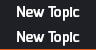
<style>
.page{position:relative;width:96px;height:50px;background:#1e2025}
.page>*{position:absolute;margin:0}
.t1{font:14px "Exo-DemiBold";color:#ffffff}
</style>
<div class="page">
<p class="t1" style="left:17px;top:6px;width:63px;height:15px">New Topic</p>
<p class="t1" style="left:17px;top:31px;width:63px;height:15px">New Topic</p>
</div>
